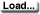
<style>
.page{position:relative;width:40px;height:14px;background:#ffffff}
.page>*{position:absolute;margin:0}
.t1{font:10px "Helvetica-Bold";color:#000000}
</style>
<div class="page">
<p class="t1" style="left:3px;top:1px;width:32px;height:8px">Load...</p>
</div>
